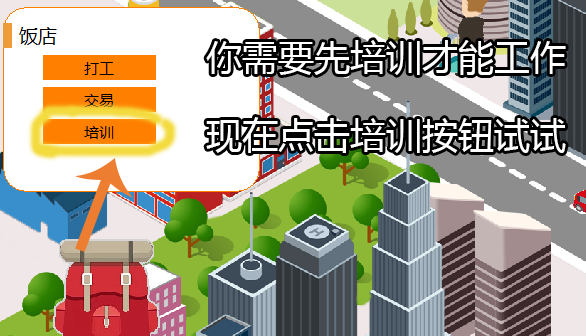
<style>
.page{position:relative;width:586px;height:336px}
.page>*{position:absolute;margin:0}
.t1{font:36px "MicrosoftYaHei";color:#ffffff}
</style>
<div class="page">
<p class="t1" style="left:206px;top:40px;width:360px;height:35px">你需要先培训才能工作</p>
<p class="t1" style="left:206px;top:117px;width:360px;height:36px">现在点击培训按钮试试</p>
</div>
